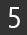
<style>
.page{position:relative;width:27px;height:35px;background:#333333}
.page>*{position:absolute;margin:0}
.t1{font:29px "SegoeUI";color:#ffffff;scale:0.93 1}
</style>
<div class="page">
<p class="t1" style="left:9px;top:7px;width:11px;height:21px">5</p>
</div>
